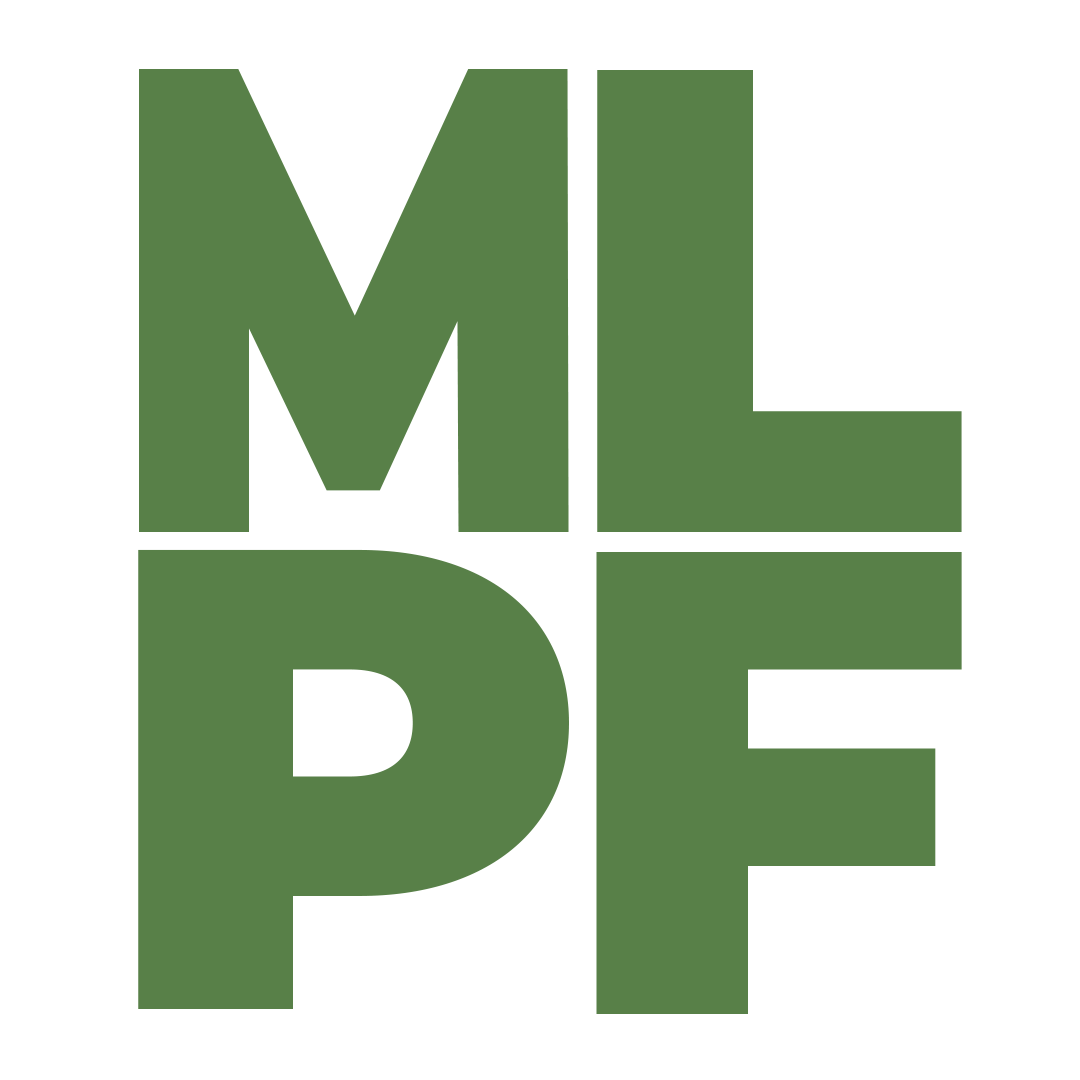
<style>
.page{position:relative;width:1080px;height:1080px;background:#ffffff}
.page>*{position:absolute;margin:0}
.t1{font:662px "Montserrat-Black";color:#588048;scale:0.77 1}
.t2{font:660px "Montserrat-Black";color:#588048}
.t3{font:656px "Montserrat-Black";color:#588048}
</style>
<div class="page">
<p class="t1" style="left:139px;top:69px;width:430px;height:463px">M</p>
<p class="t2" style="left:597px;top:70px;width:365px;height:462px">L</p>
<p class="t3" style="left:138px;top:549px;width:431px;height:460px">P</p>
<p class="t2" style="left:596px;top:552px;width:366px;height:462px">F</p>
</div>
